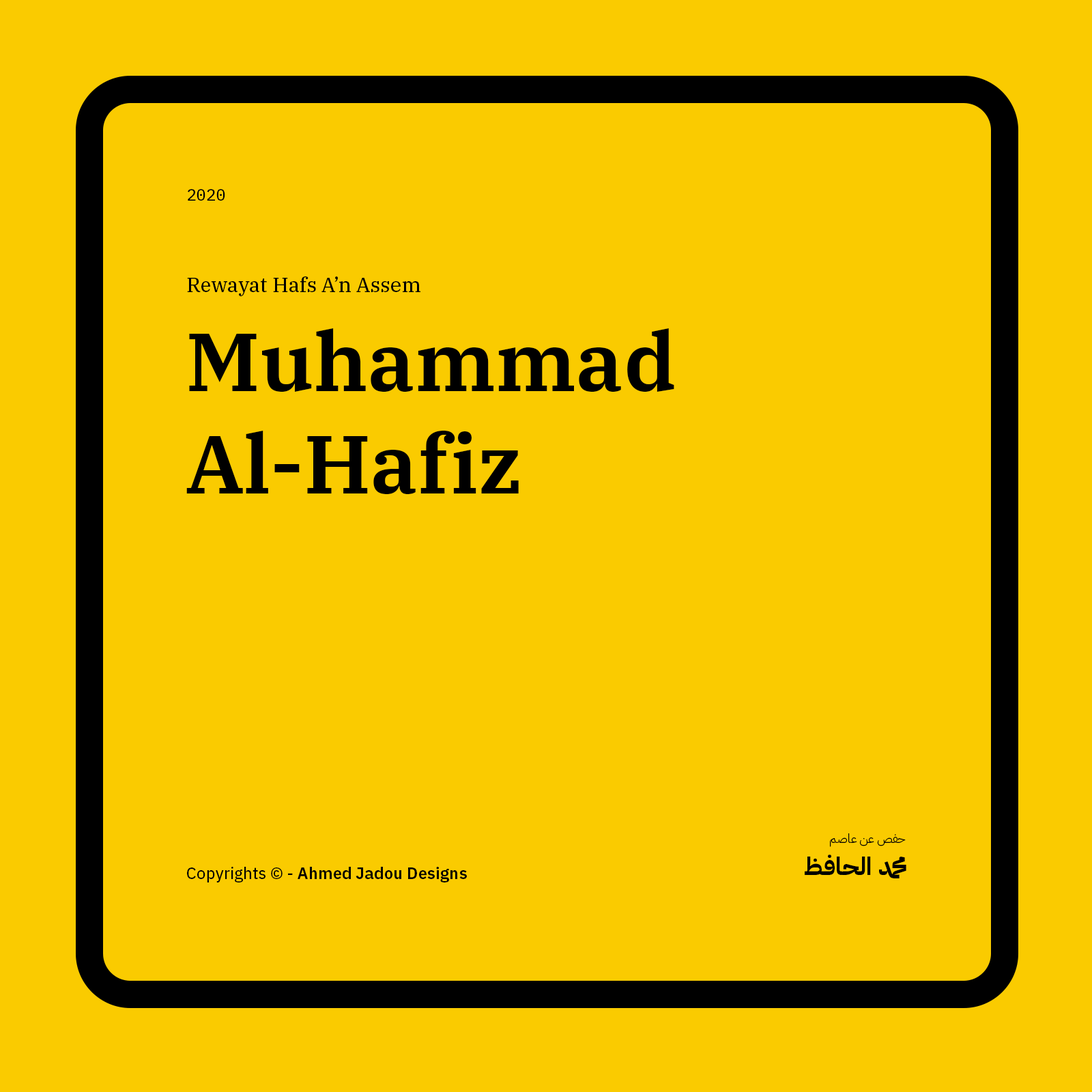
<style>
.page{position:relative;width:1092px;height:1092px;background:#facb00}
.page>*{position:absolute;margin:0}
.t1{font:16.4px "IBMPlexMono-Text";color:#000000}
.t2{font:20.5px "IBMPlexSerif-Text";color:#000000}
.t3{font:81.9px/102.7px "IBMPlexSerif-SemiBold";color:#000000}
.t4{font:12.3px "IBMPlexArabic-Light";color:#000000}
.t5{font:24.6px "IBMPlexArabic-Bold";color:#000000}
.t6{font:16.4px "IBMPlexSans-SemiBold";color:#000000}
.t7{font:16.4px "IBMPlexSans-Text";color:#000000}
</style>
<div class="page">
<p class="t1" style="left:188px;top:189px;width:37px;height:12px">2020</p>
<p class="t2" style="left:187px;top:276px;width:233px;height:20px">Rewayat Hafs A’n Assem</p>
<p class="t3" style="left:186px;top:328px;width:488px;height:166px">Muhammad Al-Hafiz</p>
<p class="t4" style="left:830px;top:833px;width:76px;height:14px">حفص عن عاصم</p>
<p class="t5" style="left:805px;top:854px;width:101px;height:24px">محمد الحافظ</p>
<p class="t6" style="left:187px;top:867px;width:280px;height:15px"><span class="t7">Copyrights © - </span>Ahmed Jadou Designs</p>
</div>
